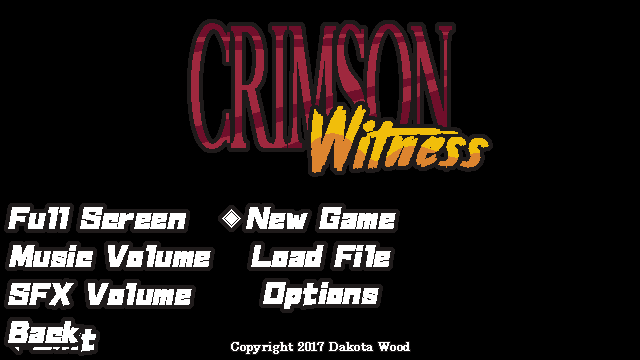
<style>
.page{position:relative;width:640px;height:360px;background:#000000}
.page>*{position:absolute;margin:0}
.t1{font:163.9px "Bludhaven_Regular";letter-spacing:-0.05em;font-weight:bold;scale:0.34 1}
.t2{font:109.8px "Stranger-back-in-the-Night";letter-spacing:0.025em;scale:1.25 1}
.t3{font:24px "GN-KMBFont-UB-OldstyleKana";letter-spacing:0.02em;color:#ffffff;font-style:italic}
.t4{font:12px "Millennium-Regular";letter-spacing:-0.05em;color:#ffffff;font-weight:bold}
</style>
<div class="page">
<p class="t1" style="left:191px;top:23px;width:261px;height:127px">CRIMSON</p>
<p class="t2" style="left:311px;top:105px;width:178px;height:68px">Witness</p>
<p class="t3" style="left:8px;top:207px;width:178px;height:22px">Full Screen</p>
<p class="t3" style="left:246px;top:207px;width:150px;height:22px">New Game</p>
<p class="t3" style="left:9px;top:245px;width:202px;height:22px">Music Volume</p>
<p class="t3" style="left:251px;top:245px;width:140px;height:22px">Load File</p>
<p class="t3" style="left:8px;top:282px;width:184px;height:24px">SFX Volume</p>
<p class="t3" style="left:8px;top:321px;width:71px;height:22px">Back</p>
<p class="t4" style="left:231px;top:342px;width:179px;height:12px">Copyright 2017 Dakota Wood</p>
</div>
